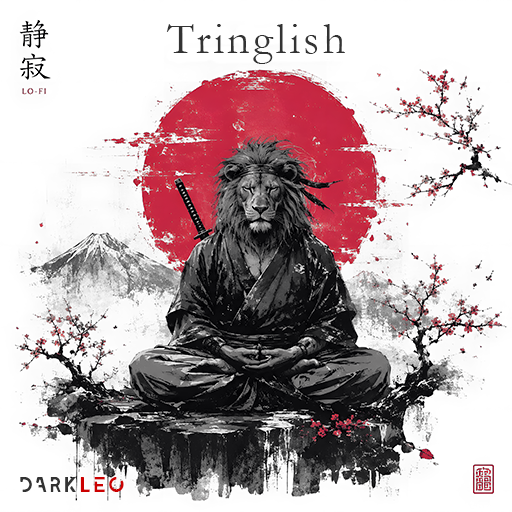
<style>
.page{position:relative;width:512px;height:512px;background:#ffffff}
.page>*{position:absolute;margin:0}
.t1{font:44.3px "Garamond";letter-spacing:0.075em;color:#333333}
.t2{font:20.3px "LEIXO-DEMO";letter-spacing:0.075em;color:#333333}
.t3{font:20.3px "LEIXO-DEMO";letter-spacing:0.075em;color:#cc0000}
</style>
<div class="page">
<p class="t1" style="left:166px;top:24px;width:179px;height:40px">Tringlish</p>
<p class="t2" style="left:20px;top:477px;width:104px;height:15px">DARK<span class="t3">LEO</span></p>
</div>
